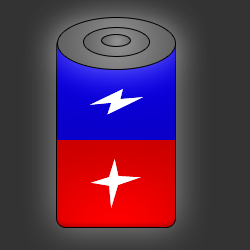
<style>
.page{position:relative;width:250px;height:250px;background:#333333}
.page>*{position:absolute;margin:0}
.t1{font:120px "Lightningvolt";color:#ffffff}
</style>
<div class="page">
<p class="t1" style="left:90px;top:89px;width:53px;height:26px">-</p>
<p class="t1" style="left:91px;top:159px;width:50px;height:49px">+</p>
</div>
